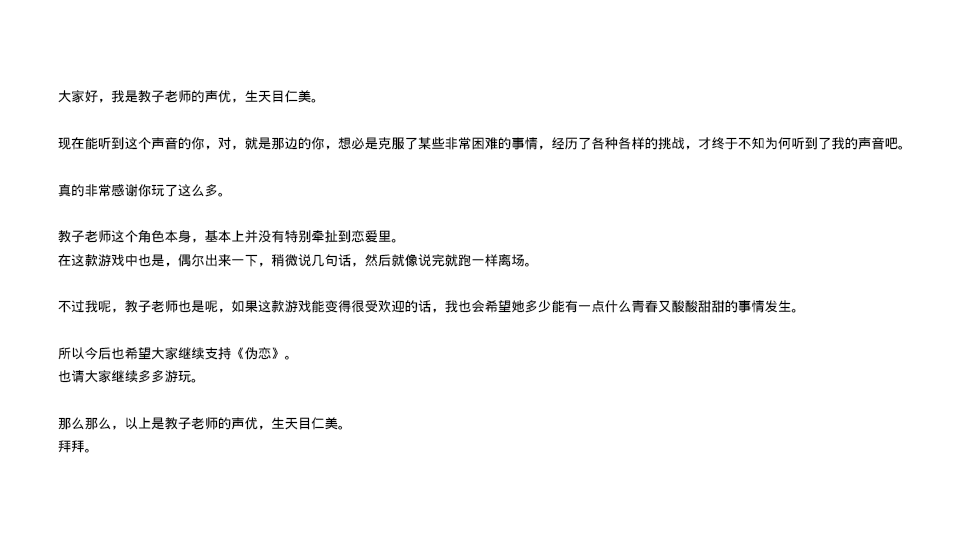
<style>
.page{position:relative;width:960px;height:544px;background:#ffffff}
.page>*{position:absolute;margin:0}
.t1{font:13.3px "WenQuanYiMicroHeiMono";color:#000000}
</style>
<div class="page">
<p class="t1" style="left:58px;top:90px;width:845px;height:363px">大家好，我是教子老师的声优，生天目仁美。<br><br>现在能听到这个声音的你，对，就是那边的你，想必是克服了某些非常困难的事情，经历了各种各样的挑战，才终于不知为何听到了我的声音吧。<br><br>真的非常感谢你玩了这么多。<br><br>教子老师这个角色本身，基本上并没有特别牵扯到恋爱里。<br>在这款游戏中也是，偶尔出来一下，稍微说几句话，然后就像说完就跑一样离场。<br><br>不过我呢，教子老师也是呢，如果这款游戏能变得很受欢迎的话，我也会希望她多少能有一点什么青春又酸酸甜甜的事情发生。<br><br>所以今后也希望大家继续支持《伪恋》。<br>也请大家继续多多游玩。<br><br>那么那么，以上是教子老师的声优，生天目仁美。<br>拜拜。</p>
</div>
